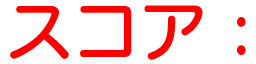
<style>
.page{position:relative;width:256px;height:64px;background:#ffffff}
.page>*{position:absolute;margin:0}
.t1{font:66.7px "SeuratProN-DB";color:#ff0000}
</style>
<div class="page">
<p class="t1" style="left:10px;top:5px;width:236px;height:55px">スコア :</p>
</div>
